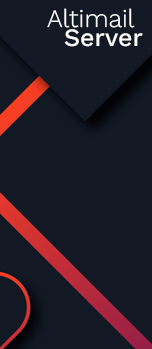
<style>
.page{position:relative;width:152px;height:349px;background:#121824}
.page>*{position:absolute;margin:0}
.t1{font:25px "WorkSans-Light";color:#fefefe}
.t2{font:25px "WorkSans-Medium";color:#fefefe}
</style>
<div class="page">
<p class="t1" style="left:47px;top:8px;width:88px;height:20px">Altimail</p>
<p class="t2" style="left:64px;top:29px;width:79px;height:18px">Server</p>
</div>
